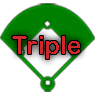
<style>
.page{position:relative;width:95px;height:95px;background:#ffffff}
.page>*{position:absolute;margin:0}
.t1{font:24.7px "ArialRoundedMTBold";color:#d02828}
</style>
<div class="page">
<p class="t1" style="left:12px;top:36px;width:68px;height:23px">Triple</p>
</div>
